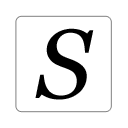
<style>
.page{position:relative;width:128px;height:128px;background:#ffffff}
.page>*{position:absolute;margin:0}
.t1{font:97.8px "Georgia-Italic";color:#000000}
</style>
<div class="page">
<p class="t1" style="left:35px;top:28px;width:59px;height:72px">S</p>
</div>
